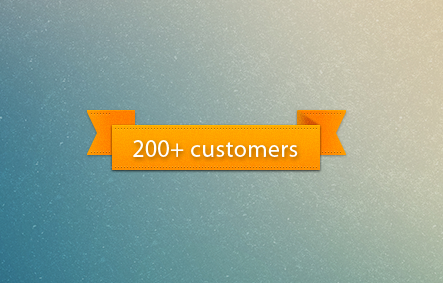
<style>
.page{position:relative;width:443px;height:283px}
.page>*{position:absolute;margin:0}
.t1{font:25.1px "MyriadPro-Regular";letter-spacing:0.02em;color:#ffffff;scale:0.95 1}
</style>
<div class="page">
<p class="t1" style="left:133px;top:140px;width:165px;height:17px">200+ customers</p>
</div>
